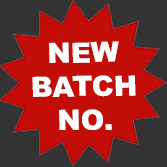
<style>
.page{position:relative;width:167px;height:167px;background:#c20d09}
.page>*{position:absolute;margin:0}
.t1{font:28.1px "Arial-Black";color:#ffffff;text-transform:uppercase}
</style>
<div class="page">
<p class="t1" style="left:32px;top:41px;width:104px;height:89px;text-align:center;rotate:-1deg">New<br>Batch<br>no.</p>
</div>
